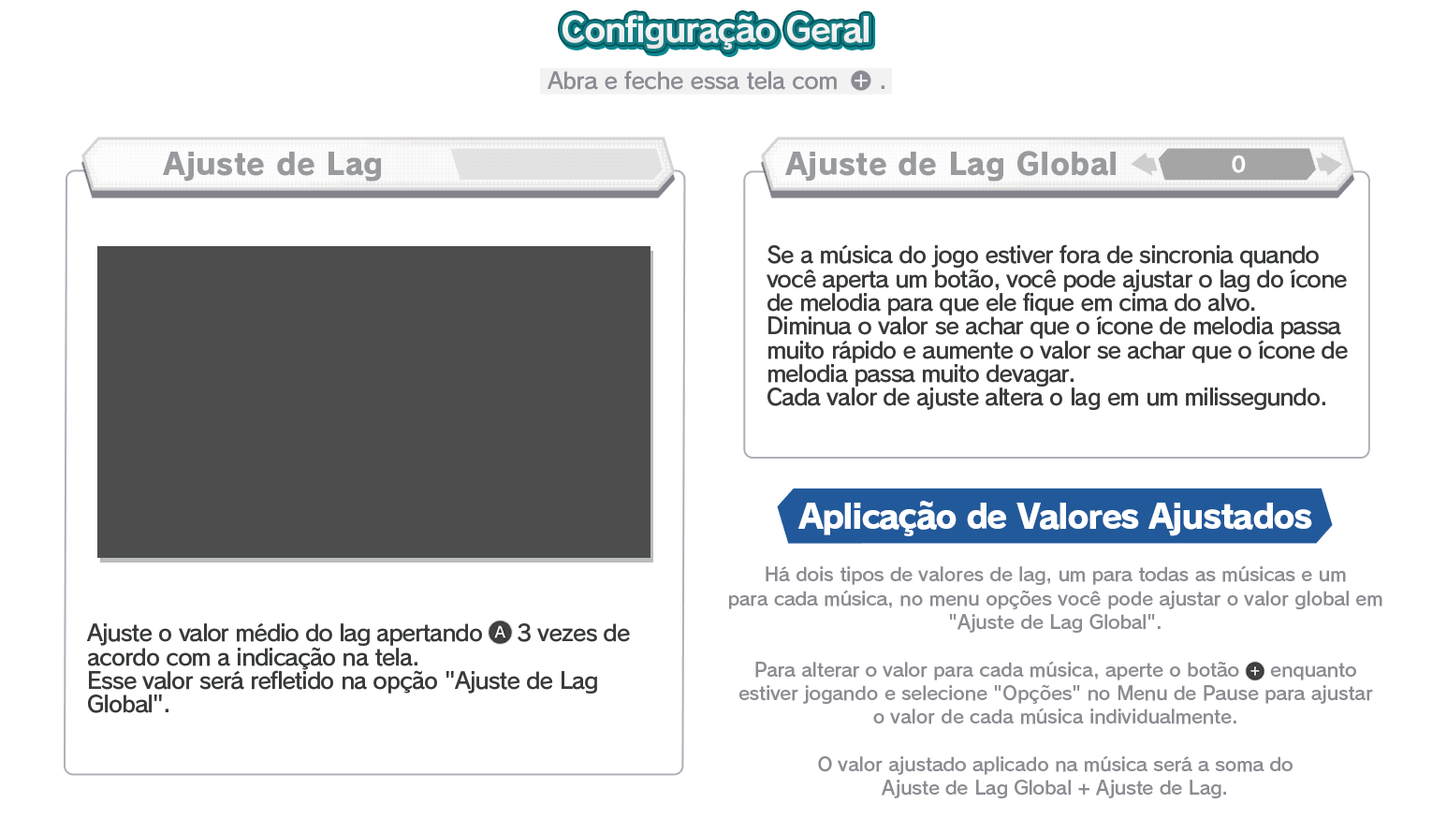
<style>
.page{position:relative;width:1432px;height:833px;background:#ffffff}
.page>*{position:absolute;margin:0}
.t1{font:33.7px "RodinPro-B";letter-spacing:-0.039em;color:#f2f3f3}
.t2{font:22.5px "RodinPro-DB";letter-spacing:-0.025em;color:#8c8b93}
.t3{font:29.9px "RodinPro-EB";letter-spacing:0.007em;color:#989a9d}
.t4{font:22.5px/23.7px "RodinPro-DB";letter-spacing:-0.04em;color:#383a3a}
.t5{font:33.7px "RodinPro-EB";letter-spacing:-0.048em;color:#ffffff}
.t6{font:18.7px/23.7px "RodinPro-DB";letter-spacing:-0.014em;color:#8c8b92}
</style>
<div class="page">
<p class="t1" style="left:562px;top:15px;width:306px;height:35px">Configuração Geral</p>
<p class="t2" style="left:547px;top:70px;width:290px;height:20px">Abra e feche essa tela com</p>
<p class="t2" style="left:881px;top:85px;width:3px;height:4px">.</p>
<p class="t3" style="left:163px;top:152px;width:218px;height:30px">Ajuste de Lag</p>
<p class="t3" style="left:785px;top:151px;width:330px;height:31px">Ajuste de Lag Global</p>
<p class="t4" style="left:766px;top:244px;width:582px;height:166px">Se a música do jogo estiver fora de sincronia quando<br>você aperta um botão, você pode ajustar o lag do ícone<br>de melodia para que ele fique em cima do alvo.<br>Diminua o valor se achar que o ícone de melodia passa<br>muito rápido e aumente o valor se achar que o ícone de<br>melodia passa muito devagar.<br>Cada valor de ajuste altera o lag em um milissegundo.</p>
<p class="t5" style="left:798px;top:501px;width:514px;height:35px">Aplicação de Valores Ajustados</p>
<p class="t6" style="left:729px;top:565px;width:653px;height:233px;text-align:center">Há dois tipos de valores de lag, um para todas as músicas e um<br>para cada música, no menu opções você pode ajustar o valor global em<br>"Ajuste de Lag Global".<br><br>Para alterar o valor para cada música, aperte o botão     enquanto<br>estiver jogando e selecione "Opções" no Menu de Pause para ajustar<br>o valor de cada música individualmente.<br><br>O valor ajustado aplicado na música será a soma do<br>Ajuste de Lag Global + Ajuste de Lag.</p>
<p class="t4" style="left:87px;top:622px;width:543px;height:91px">Ajuste o valor médio do lag apertando     3 vezes de<br>acordo com a indicação na tela.<br>Esse valor será refletido na opção "Ajuste de Lag<br>Global".</p>
</div>
